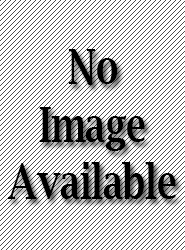
<style>
.page{position:relative;width:185px;height:250px;background:#ffffff}
.page>*{position:absolute;margin:0}
.t1{font:48px "LucidaBright-Demi";color:#000000;scale:0.74 1}
</style>
<div class="page">
<p class="t1" style="left:8px;top:49px;width:168px;height:150px;text-align:center">No<br>Image<br>Available</p>
</div>
